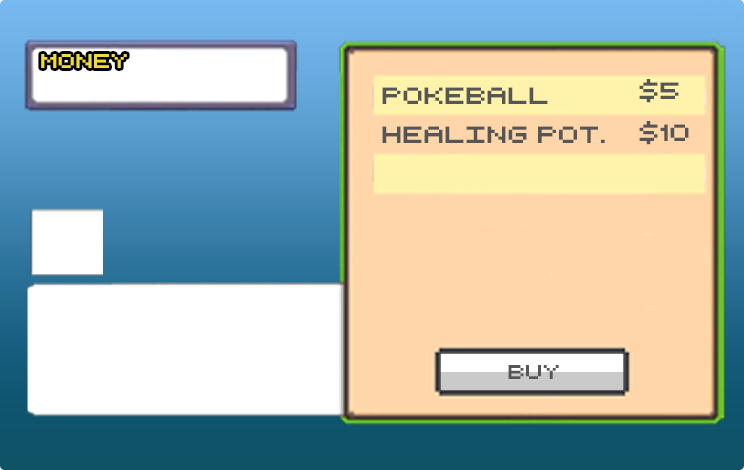
<style>
.page{position:relative;width:744px;height:470px;background:#ffd6aa}
.page>*{position:absolute;margin:0}
.t1{font:19.2px "RetroComputer";color:#f0dc38;scale:1.09 1}
.t2{font:22.9px "RetroComputer";color:#565656;scale:1.09 1}
.t3{font:19.2px "RetroComputer";color:#565656;scale:1.09 1}
</style>
<div class="page">
<p class="t1" style="left:41px;top:54px;width:86px;height:14px">money</p>
<p class="t2" style="left:382px;top:87px;width:166px;height:17px">Pokeball</p>
<p class="t2" style="left:639px;top:79px;width:40px;height:24px">$5</p>
<p class="t2" style="left:382px;top:126px;width:223px;height:17px">healing pot.</p>
<p class="t2" style="left:639px;top:121px;width:50px;height:24px">$10</p>
<p class="t3" style="left:508px;top:365px;width:51px;height:14px">buy</p>
</div>
